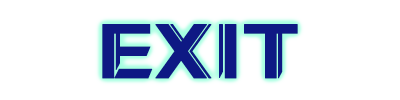
<style>
.page{position:relative;width:400px;height:100px;background:#ffffff}
.page>*{position:absolute;margin:0}
.t1{font:75px "SweraDemoShadowed";color:#0e1984;font-weight:bold}
</style>
<div class="page">
<p class="t1" style="left:102px;top:24px;width:196px;height:55px">Exit</p>
</div>
